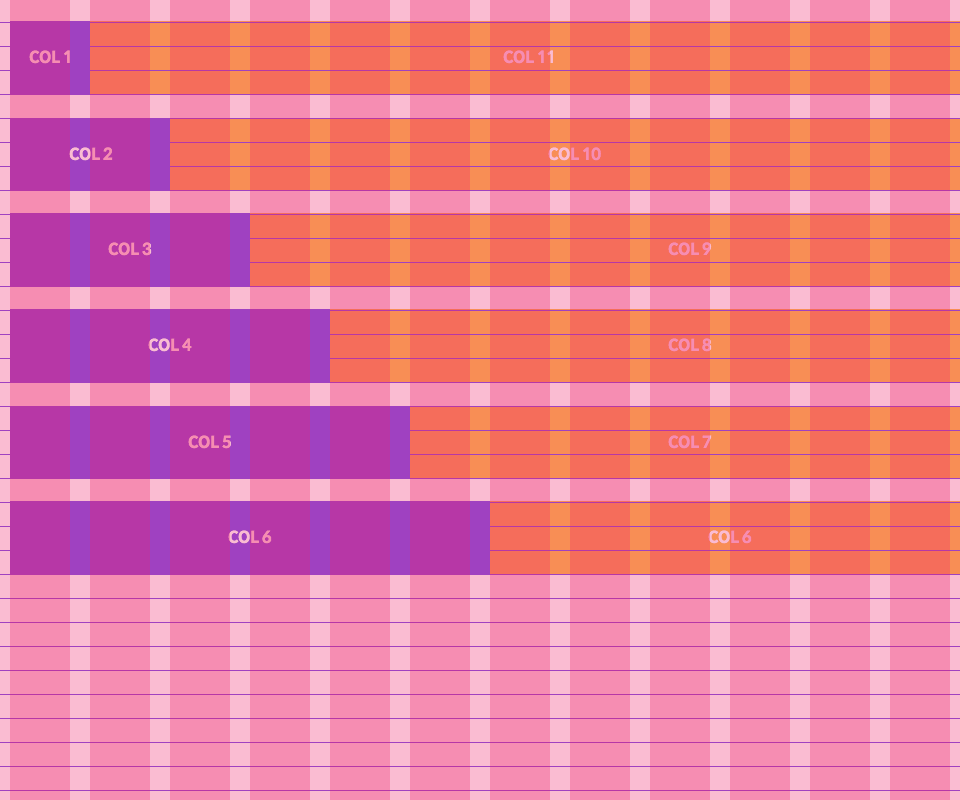
<style>
.page{position:relative;width:960px;height:800px;background:#f68db2}
.page>*{position:absolute;margin:0}
.t1{font:16px "SpoqaHanSans-Bold";letter-spacing:-0.025em;color:#f68db2}
.t2{font:16px "SpoqaHanSans-Bold";letter-spacing:-0.025em}
</style>
<div class="page">
<p class="t1" style="left:29px;top:50px;width:41px;height:14px">COL 1</p>
<p class="t1" style="left:503px;top:50px;width:50px;height:14px">COL 11</p>
<p class="t2" style="left:69px;top:147px;width:44px;height:14px">COL 2</p>
<p class="t2" style="left:548px;top:147px;width:53px;height:14px">COL 10</p>
<p class="t1" style="left:108px;top:242px;width:44px;height:14px">COL 3</p>
<p class="t1" style="left:668px;top:242px;width:44px;height:14px">COL 9</p>
<p class="t2" style="left:148px;top:338px;width:44px;height:14px">COL 4</p>
<p class="t1" style="left:668px;top:338px;width:44px;height:14px">COL 8</p>
<p class="t1" style="left:188px;top:435px;width:43px;height:14px">COL 5</p>
<p class="t1" style="left:668px;top:435px;width:44px;height:14px">COL 7</p>
<p class="t2" style="left:228px;top:530px;width:44px;height:14px">COL 6</p>
<p class="t2" style="left:708px;top:530px;width:44px;height:14px">COL 6</p>
</div>
